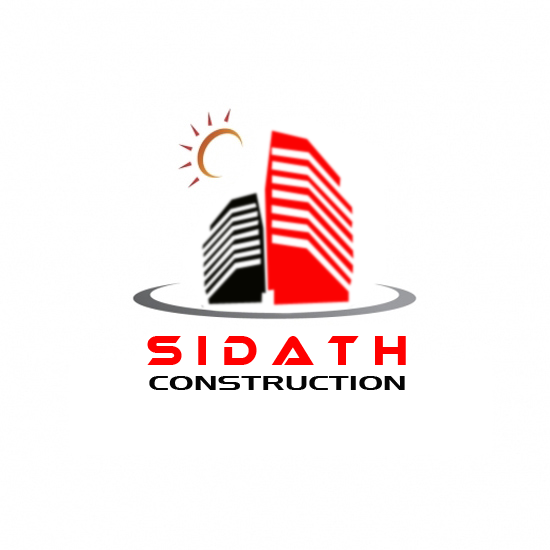
<style>
.page{position:relative;width:550px;height:550px;background:#ffffff}
.page>*{position:absolute;margin:0}
.t1{font:39.3px "Ethnocentric";color:#ff0000;scale:0.89 1}
.t2{font:19.1px "AeroRegularSWFTE";color:#050505;scale:1.65 1}
</style>
<div class="page">
<p class="t1" style="left:147px;top:336px;width:259px;height:29px">S I D A T H</p>
<p class="t2" style="left:149px;top:376px;width:256px;height:14px">CONSTRUCTION</p>
</div>
